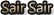
<style>
.page{position:relative;width:54px;height:15px;background:#141414}
.page>*{position:absolute;margin:0}
.t1{font:14px "MicrosoftNewTaiLue"}
</style>
<div class="page">
<p class="t1" style="left:2px;top:2px;width:23px;height:11px">Sair</p>
<p class="t1" style="left:29px;top:2px;width:23px;height:11px">Sair</p>
</div>
